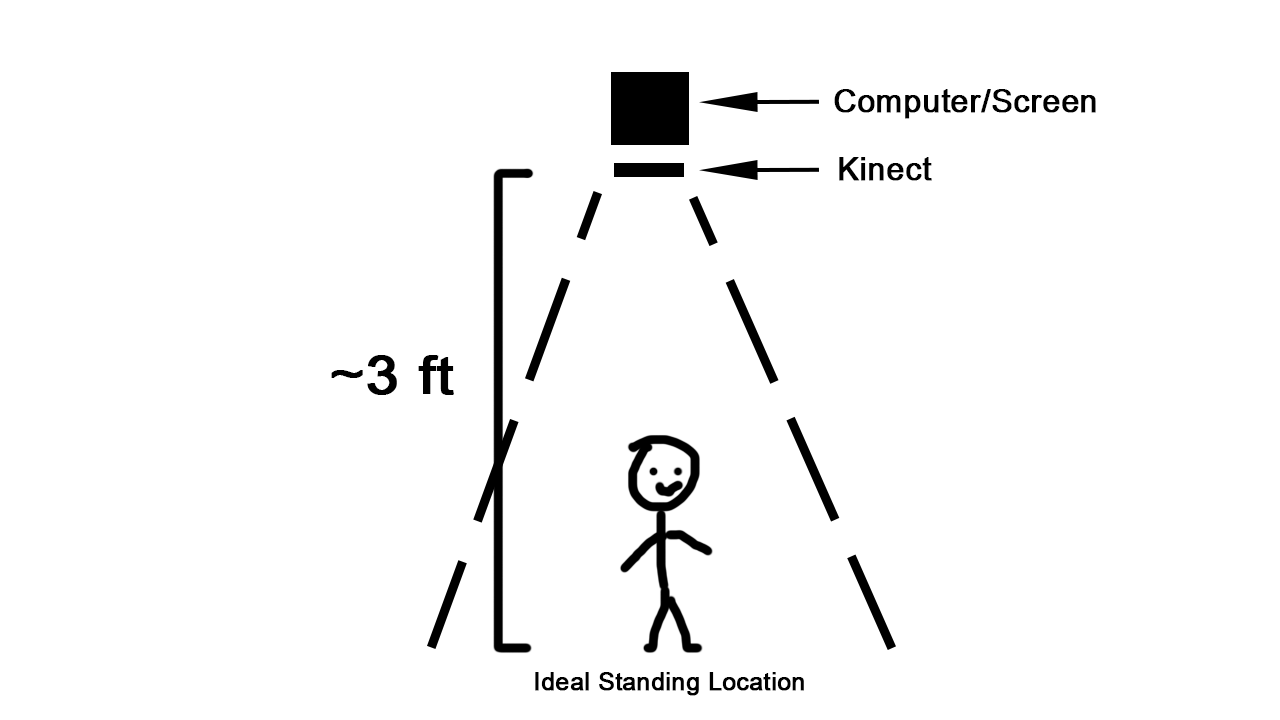
<style>
.page{position:relative;width:1280px;height:720px;background:#ffffff}
.page>*{position:absolute;margin:0}
.t1{font:44.1px "Utsaah";color:#000000;font-weight:bold}
.t2{font:72.8px "Utsaah";color:#000000;font-weight:bold;scale:1.11 1}
.t3{font:33.6px "Utsaah";color:#000000;font-weight:bold}
</style>
<div class="page">
<p class="t1" style="left:834px;top:89px;width:262px;height:30px">Computer/Screen</p>
<p class="t1" style="left:839px;top:157px;width:93px;height:24px">Kinect</p>
<p class="t2" style="left:331px;top:355px;width:123px;height:40px">~3 ft</p>
<p class="t3" style="left:535px;top:672px;width:269px;height:24px">Ideal Standing Location</p>
</div>
